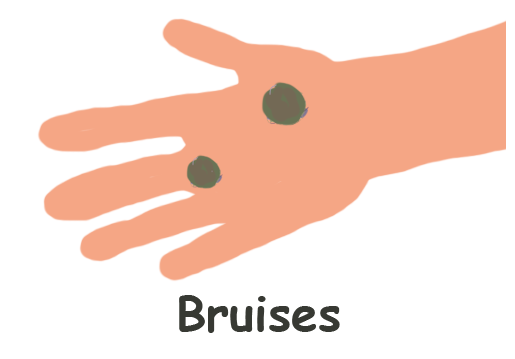
<style>
.page{position:relative;width:515px;height:359px;background:#ffffff}
.page>*{position:absolute;margin:0}
.t1{font:48px "ComicSansMS-Bold";color:#373933}
</style>
<div class="page">
<p class="t1" style="left:179px;top:295px;width:161px;height:38px">Bruises</p>
</div>
